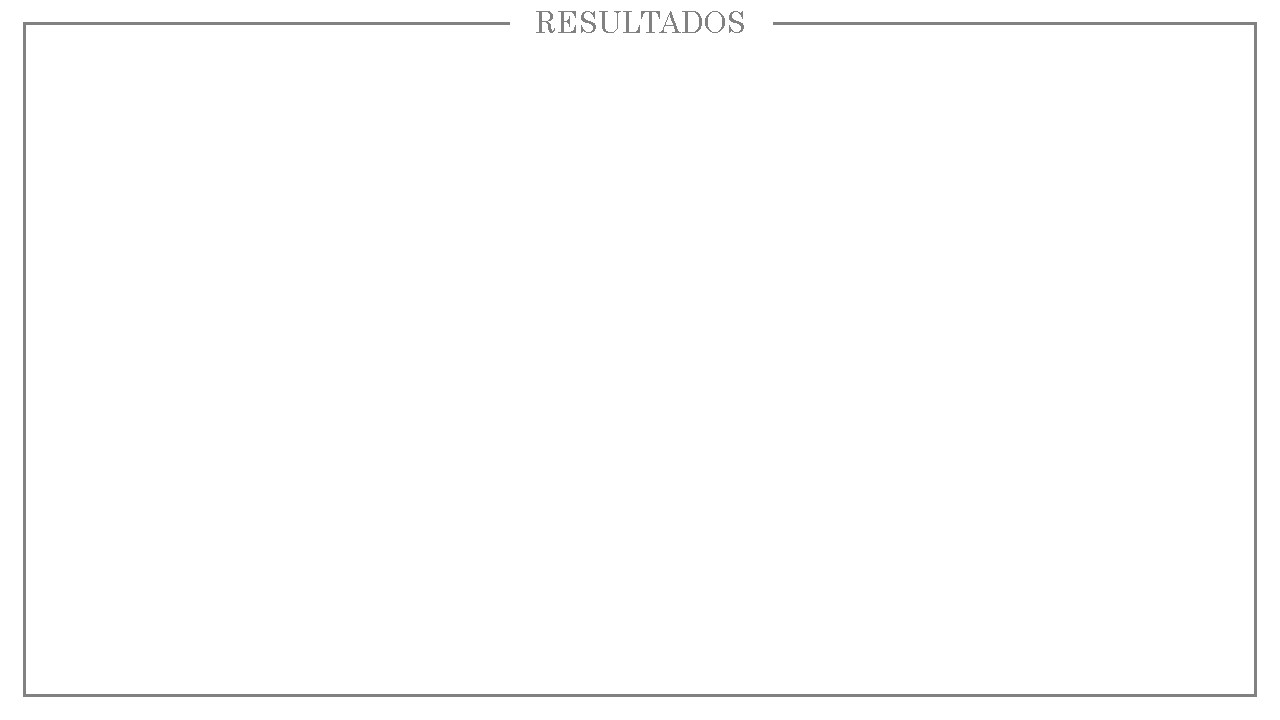
<style>
.page{position:relative;width:1280px;height:720px;background:#ffffff}
.page>*{position:absolute;margin:0}
.t1{font:30px "Century";color:#818181}
</style>
<div class="page">
<p class="t1" style="left:536px;top:11px;width:208px;height:22px">RESULTADOS</p>
</div>
